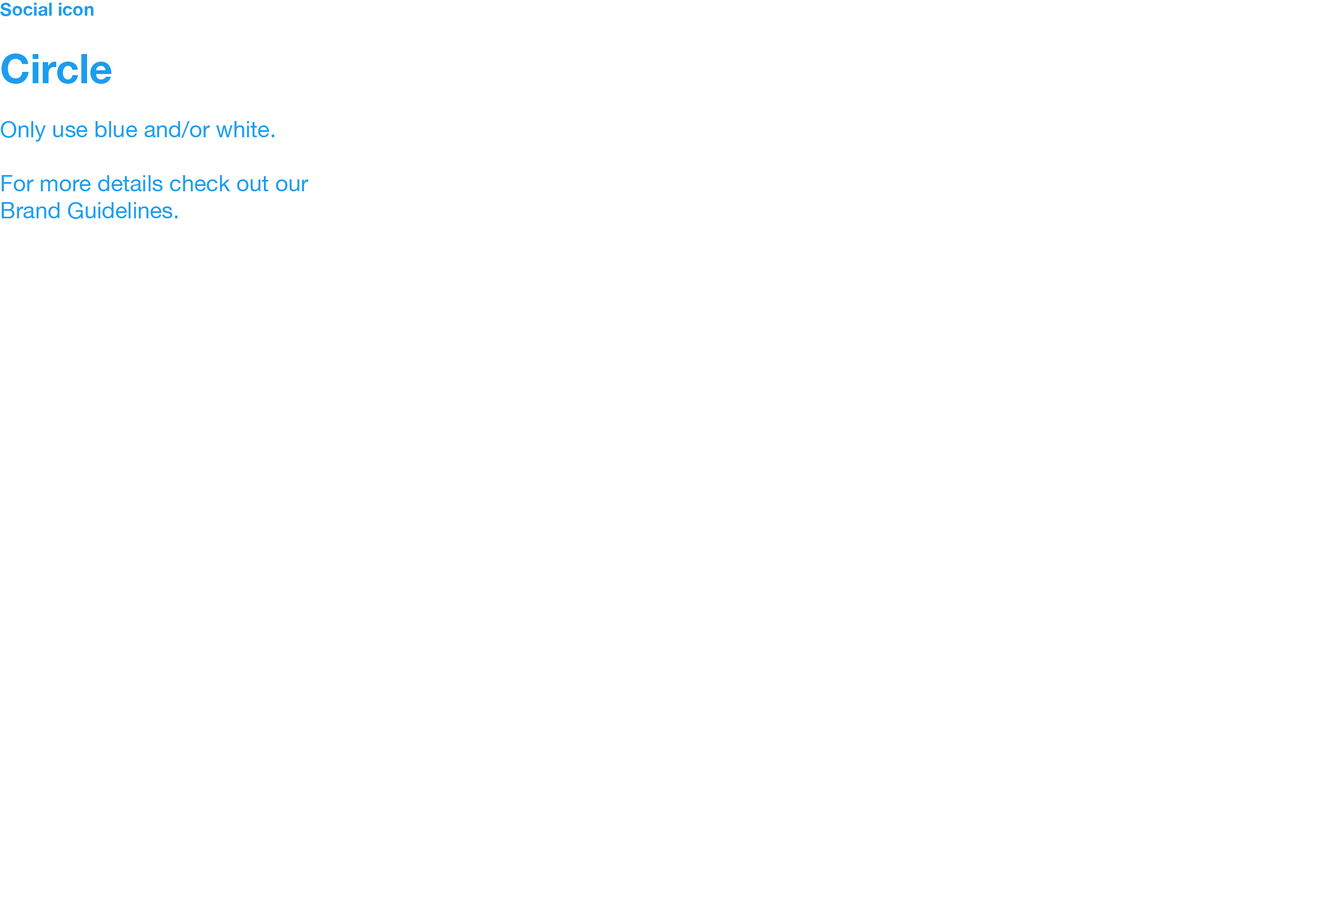
<style>
.page{position:relative;width:1320px;height:903px;background:#ffffff}
.page>*{position:absolute;margin:0}
.t1{font:22.5px "HelveticaNeue";color:#1b9df0}
.t2{font:18px/40.6px "HelveticaNeue-Bold";color:#1b9df0}
.t3{font:40.6px/40.6px "HelveticaNeue-Bold";color:#1b9df0}
</style>
<div class="page">
<p class="t1" style="left:0px;top:3px;width:308px;height:216px"><span class="t2">Social icon<br><br></span><span class="t3">Circle<br></span><br>Only use blue and/or white.<br><br>For more details check out our<br>Brand Guidelines.</p>
</div>
